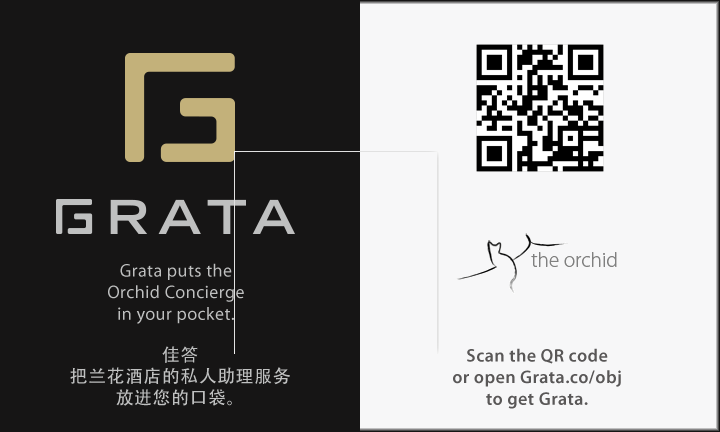
<style>
.page{position:relative;width:720px;height:432px;background:#161515}
.page>*{position:absolute;margin:0}
.t1{font:18px "MyriadPro-Regular";letter-spacing:0.025em;color:#bfc0c0}
.t2{font:18px "AdobeHeitiStd-Regular";letter-spacing:0.025em;color:#bfc0c0}
.t3{font:18px "AdobeHeitiStd-Regular";letter-spacing:0.025em;color:#bfc0c0;font-variant:small-caps}
.t4{font:18px "MyriadPro-Semibold";letter-spacing:0.025em;color:#595757}
</style>
<div class="page">
<p class="t1" style="left:108px;top:263px;width:136px;height:61px;text-align:center">Grata puts the <br>Orchid Concierge<br>in your pocket. <br>Whatever you need, just ask.</p>
<p class="t2" style="left:70px;top:346px;width:220px;height:60px;text-align:center">佳答<br>把兰花酒店的私人助理服务<br><span class="t3">放进您的口袋。</span></p>
<p class="t4" style="left:453px;top:348px;width:168px;height:61px;text-align:center">Scan the QR code <br>or open Grata.co/obj<br>to get Grata.</p>
</div>
